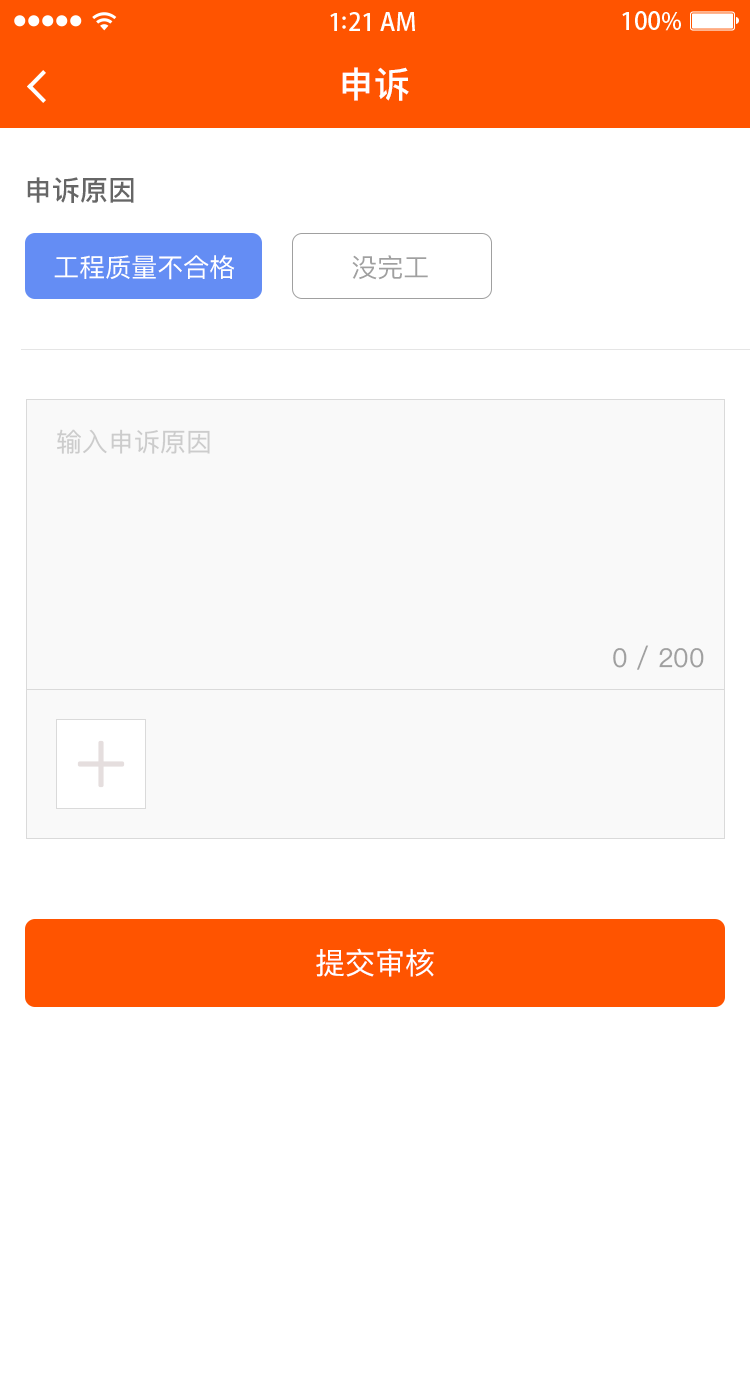
<style>
.page{position:relative;width:750px;height:1392px;background:#ffffff}
.page>*{position:absolute;margin:0}
.t1{font:36px "PingFangSC-Medium";color:#ffffff}
.t2{font:28px "PingFangSC-Medium";color:#666666}
.t3{font:26px "PingFangSC-Regular";color:#ffffff;text-transform:uppercase}
.t4{font:26px "PingFangSC-Regular";color:#a0a0a0;text-transform:uppercase}
.t5{font:26px "PingFangSC-Regular";color:#cccccc}
.t6{font:26px "PingFangSC-Regular";color:#a0a0a0}
.t7{font:30px "PingFangSC-Regular";color:#ffffff;text-transform:uppercase}
</style>
<div class="page">
<p class="t1" style="left:342px;top:67px;width:67px;height:34px">申诉</p>
<p class="t2" style="left:27px;top:177px;width:107px;height:26px">申诉原因</p>
<p class="t3" style="left:54px;top:255px;width:181px;height:25px">工程质量不合格</p>
<p class="t4" style="left:352px;top:255px;width:76px;height:25px">没完工</p>
<p class="t5" style="left:57px;top:429px;width:153px;height:25px">输入申诉原因</p>
<p class="t6" style="left:613px;top:645px;width:91px;height:25px">0 / 200</p>
<p class="t7" style="left:316px;top:948px;width:118px;height:29px">提交审核</p>
</div>
